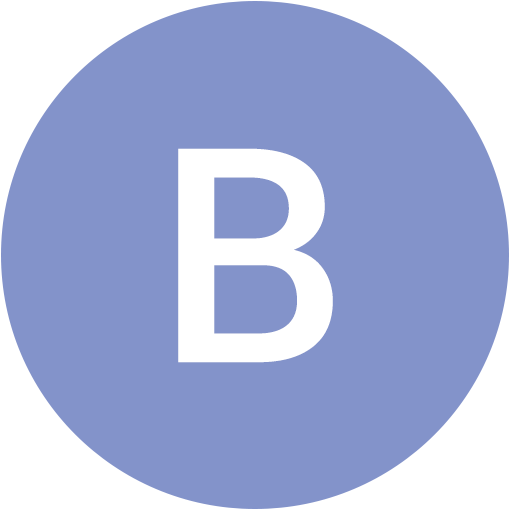
<style>
.page{position:relative;width:512px;height:512px;background:#8393ca}
.page>*{position:absolute;margin:0}
.t1{font:300px "Roboto-Medium";color:#ffffff}
</style>
<div class="page">
<p class="t1" style="left:178px;top:148px;width:155px;height:215px">B</p>
</div>
